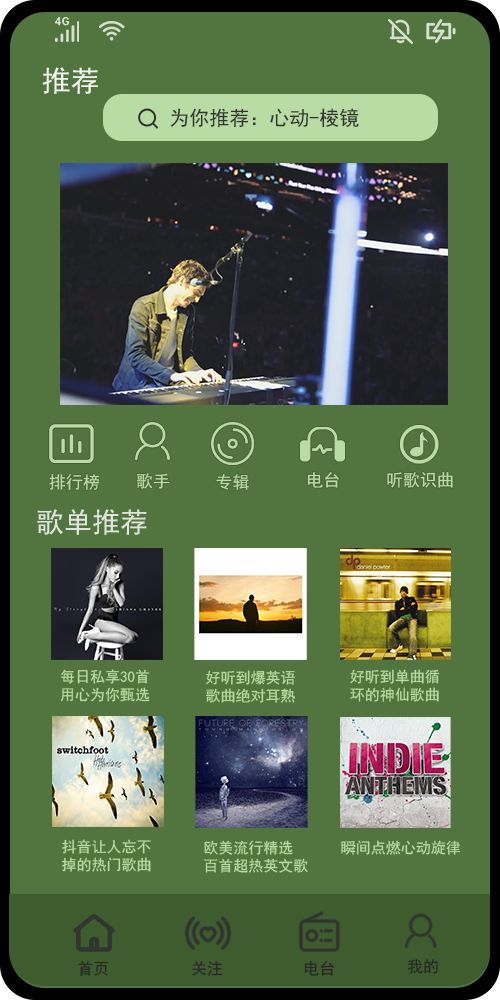
<style>
.page{position:relative;width:500px;height:1000px;background:#52753f}
.page>*{position:absolute;margin:0}
.t1{font:29px "SimHei";color:#f1f5ef}
.t2{font:20px "SimHei";color:#323332}
.t3{font:17px "SimHei";color:#b9dca4}
.t4{font:28px "SimHei";color:#dfe5dc}
.t5{font:15px/18px "SimHei";color:#b9dca4}
.t6{font:15px "SimHei";color:#b9dca4}
.t7{font:16px "SimHei";color:#272826}
</style>
<div class="page">
<p class="t1" style="left:42px;top:67px;width:56px;height:27px">推荐</p>
<p class="t2" style="left:170px;top:108px;width:189px;height:20px">为你推荐：心动-棱镜</p>
<p class="t3" style="left:136px;top:473px;width:34px;height:16px">歌手</p>
<p class="t3" style="left:216px;top:473px;width:33px;height:17px">专辑</p>
<p class="t3" style="left:307px;top:472px;width:32px;height:16px">电台</p>
<p class="t3" style="left:387px;top:472px;width:66px;height:16px">听歌识曲</p>
<p class="t3" style="left:49px;top:474px;width:51px;height:16px">排行榜</p>
<p class="t4" style="left:37px;top:509px;width:110px;height:26px">歌单推荐</p>
<p class="t5" style="left:60px;top:669px;width:90px;height:33px">每日私享30首<br>用心为你甄选</p>
<p class="t5" style="left:206px;top:670px;width:90px;height:33px">好听到爆英语<br>歌曲绝对耳熟</p>
<p class="t5" style="left:350px;top:669px;width:90px;height:33px">好听到单曲循<br>环的神仙歌曲</p>
<p class="t5" style="left:62px;top:839px;width:89px;height:33px">抖音让人忘不<br>掉的热门歌曲</p>
<p class="t5" style="left:204px;top:840px;width:104px;height:33px">欧美流行精选<br>百首超热英文歌</p>
<p class="t6" style="left:341px;top:840px;width:120px;height:15px">瞬间点燃心动旋律</p>
<p class="t7" style="left:78px;top:960px;width:31px;height:16px">首页</p>
<p class="t7" style="left:192px;top:961px;width:31px;height:15px">关注</p>
<p class="t7" style="left:304px;top:960px;width:30px;height:16px">电台</p>
<p class="t7" style="left:407px;top:959px;width:31px;height:15px">我的</p>
</div>
